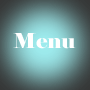
<style>
.page{position:relative;width:90px;height:90px}
.page>*{position:absolute;margin:0}
.t1{font:20.6px "Elephant-Regular";color:#ffffff;scale:1.04 1}
</style>
<div class="page">
<p class="t1" style="left:13px;top:33px;width:63px;height:16px">Menu</p>
</div>
